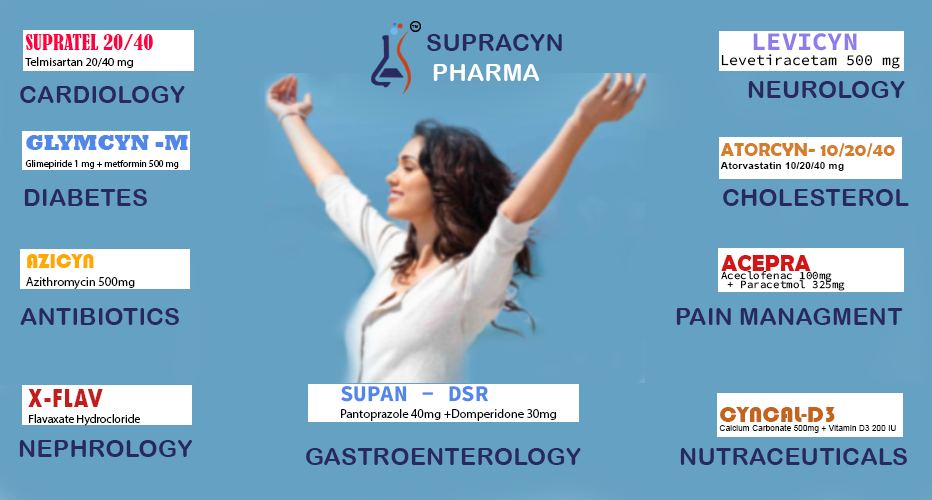
<style>
.page{position:relative;width:932px;height:500px;background:#65a1c3}
.page>*{position:absolute;margin:0}
.t1{font:11.9px/15.8px "MyriadPro-Regular";color:#000000}
.t2{font:20.3px/15.8px "BernardMT-Condensed";color:#ff0042}
.t3{font:15px/15.4px "SourceCodeVariable-Roman";color:#000000}
.t4{font:25.4px/15.4px "SourceCodeRoman-Bold";color:#8f7bec}
.t5{font:15.3px/15.7px "SourceCodeVariable-Roman";color:#000000}
.t6{font:26px/15.7px "SourceCodeRoman-Bold";color:#8f7bec}
.t7{font:9.6px/16.1px "MyriadPro-Regular";color:#000000}
.t8{font:21.8px/16.1px "Rockwell-ExtraBold";color:#5087e9}
.t9{font:10.5px/13.8px "Arial-BoldMT";color:#000000}
.t10{font:18.9px/13.8px "BerlinSansFBDemi-Bold";color:#d47d2a}
.t11{font:12.5px/18.5px "MyriadPro-Regular";color:#000000}
.t12{font:20.9px/18.3px "Bauhaus93";color:#ffa800}
.t13{font:10.8px/8.5px "SourceCodeVariable-Roman";color:#000000}
.t14{font:23.1px/15.4px "BerlinSansFBDemi-Bold";color:#d31515}
.t15{font:11.7px/15.7px "MyriadPro-Regular";color:#000000}
.t16{font:28.4px/15.7px "TwCenMT-CondensedExtraBold";color:#c21c1c}
.t17{font:12.4px/16.7px "MyriadPro-Regular";color:#000000}
.t18{font:22.5px/16.7px "SourceCodeRoman-Bold";color:#5087e9}
.t19{font:8.4px/9.7px "ArialMT";color:#000000}
.t20{font:23.3px/9.7px "Bauhaus93";color:#c3641d}
</style>
<div class="page">
<p class="t1" style="left:25px;top:34px;width:128px;height:34px"><span class="t2">SUPRATEL 20/40<br></span>Telmisartan 20/40 mg</p>
<p class="t3" style="left:721px;top:33px;width:179px;height:36px"><span class="t4">  LEVICYN<br></span>Levetiracetam 500 mg</p>
<p class="t5" style="left:721px;top:32px;width:182px;height:38px"><span class="t6">  LEVICYN<br></span>Levetiracetam 500 mg</p>
<p class="t7" style="left:25px;top:135px;width:163px;height:34px"><span class="t8">GLYMCYN -M<br></span>Glimepiride 1 mg + metformin 500 mg</p>
<p class="t9" style="left:720px;top:143px;width:175px;height:28px"><span class="t10">ATORCYN- 10/20/40<br></span>Atorvastatin 10/20/40 mg</p>
<p class="t11" style="left:26px;top:254px;width:109px;height:35px"><span class="t12">AZICYN <br></span>Azithromycin 500mg</p>
<p class="t13" style="left:721px;top:255px;width:124px;height:36px"><span class="t14">ACEPRA<br></span>Aceclofenac 100mg<br> + Paracetmol 325mg</p>
<p class="t15" style="left:28px;top:389px;width:112px;height:37px"><span class="t16">X-FLAV<br></span>Flavaxate Hydrocloride</p>
<p class="t17" style="left:341px;top:386px;width:215px;height:35px"><span class="t18">SUPAN - DSR<br></span>Pantoprazole 40mg +Domperidone 30mg</p>
<p class="t19" style="left:719px;top:407px;width:177px;height:26px"><span class="t20">CYNCAL-D3<br></span>Calcium Carbonate 500mg + Vitamin D3 200 IU</p>
</div>
